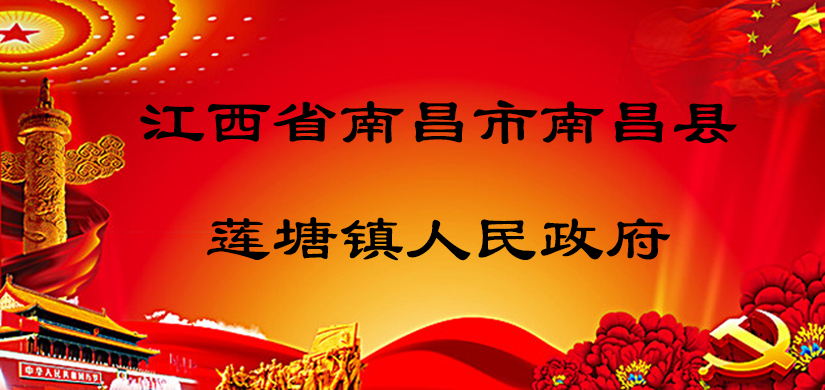
<style>
.page{position:relative;width:825px;height:390px}
.page>*{position:absolute;margin:0}
.t1{font:66.7px "LiSu";color:#000000}
.t2{font:75px "LiSu";color:#000000}
</style>
<div class="page">
<p class="t1" style="left:140px;top:100px;width:598px;height:161px;text-align:center">江西省南昌市南昌县<br>莲塘镇人民政府<br><span class="t2">莲塘镇人民政府</span></p>
</div>
